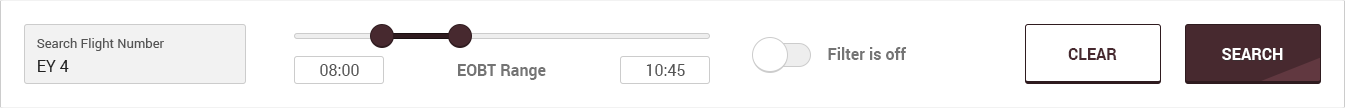
<style>
.page{position:relative;width:1345px;height:108px;background:#ffffff}
.page>*{position:absolute;margin:0}
.t1{font:13px "Roboto-Regular";color:#555555}
.t2{font:16px "Roboto-Bold";color:#747474}
.t3{font:16px "Roboto-Bold";color:#47292f;text-transform:uppercase}
.t4{font:16px "Roboto-Bold";color:#ffffff;text-transform:uppercase}
.t5{font:16px "Roboto-Regular";color:#222222}
.t6{font:16px "Roboto-Regular";color:#555555}
</style>
<div class="page">
<p class="t1" style="left:37px;top:38px;width:127px;height:13px">Search Flight Number</p>
<p class="t2" style="left:828px;top:47px;width:79px;height:13px">Filter is off</p>
<p class="t3" style="left:1068px;top:48px;width:49px;height:12px">clear</p>
<p class="t4" style="left:1222px;top:48px;width:61px;height:12px">search</p>
<p class="t5" style="left:38px;top:60px;width:31px;height:12px">EY 4</p>
<p class="t6" style="left:320px;top:64px;width:39px;height:12px">08:00</p>
<p class="t2" style="left:458px;top:64px;width:88px;height:16px">EOBT Range</p>
<p class="t6" style="left:646px;top:64px;width:39px;height:12px">10:45</p>
</div>
